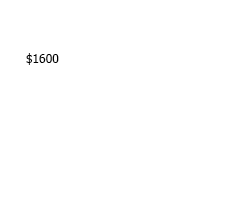
<style>
.page{position:relative;width:251px;height:201px;background:#ffffff}
.page>*{position:absolute;margin:0}
.t1{font:12px "Tahoma";color:#000000}
</style>
<div class="page">
<p class="t1" style="left:26px;top:53px;width:33px;height:12px">$1600</p>
</div>
